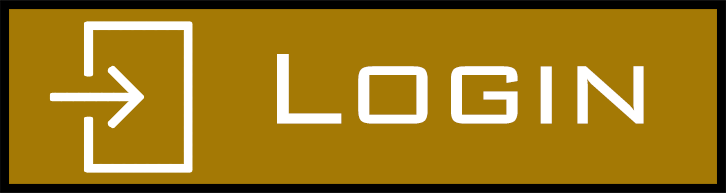
<style>
.page{position:relative;width:726px;height:193px;background:#a47905}
.page>*{position:absolute;margin:0}
.t1{font:134.2px "BankGothic-Light";color:#ffffff}
</style>
<div class="page">
<p class="t1" style="left:277px;top:54px;width:367px;height:70px">Login</p>
</div>
